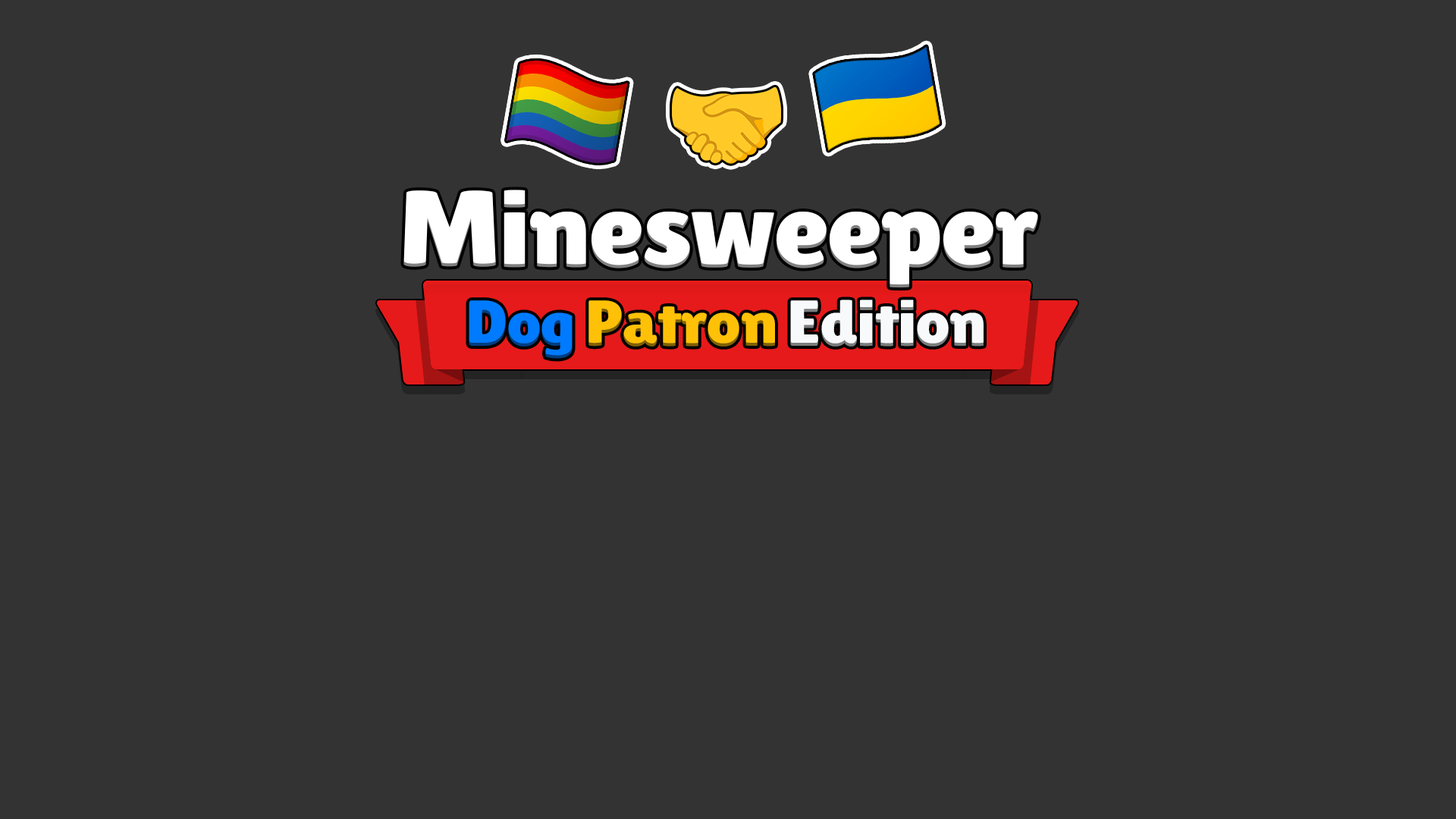
<style>
.page{position:relative;width:1456px;height:819px;background:#333333}
.page>*{position:absolute;margin:0}
.t1{font:108.1px "LilitaOneRus";letter-spacing:-0.02em;color:#ffffff;scale:1.05 1}
.t2{font:64.8px "LilitaOneRus";letter-spacing:-0.02em;color:#f8f9fa;scale:1.05 1}
.t3{font:64.8px "LilitaOneRus";letter-spacing:-0.02em;color:#007bff;scale:1.05 1}
.t4{font:64.8px "LilitaOneRus";letter-spacing:-0.02em;color:#ffc107;scale:1.05 1}
</style>
<div class="page">
<p class="t1" style="left:403px;top:190px;width:635px;height:98px">Minesweeper</p>
<p class="t2" style="left:469px;top:300px;width:515px;height:59px"><span class="t3">Dog </span><span class="t4">Patron </span>Edition</p>
</div>
